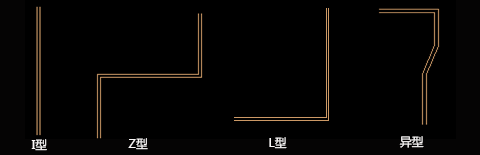
<style>
.page{position:relative;width:480px;height:155px;background:#000000}
.page>*{position:absolute;margin:0}
.t1{font:12px "MicrosoftYaHei";color:#fbf9f9}
</style>
<div class="page">
<p class="t1" style="left:269px;top:137px;width:18px;height:12px">L型</p>
<p class="t1" style="left:399px;top:136px;width:25px;height:12px">异型</p>
<p class="t1" style="left:31px;top:139px;width:16px;height:12px">I型</p>
<p class="t1" style="left:128px;top:138px;width:20px;height:12px">Z型</p>
</div>
